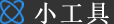
<style>
.page{position:relative;width:114px;height:24px;background:#333333}
.page>*{position:absolute;margin:0}
.t1{font:24px "SimSun";letter-spacing:0.1em;color:#ffffff;text-transform:uppercase;font-weight:bold}
</style>
<div class="page">
<p class="t1" style="left:34px;top:2px;width:75px;height:23px">小工具</p>
</div>
